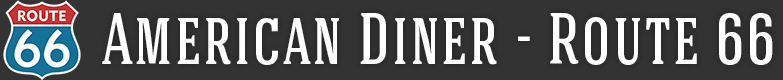
<style>
.page{position:relative;width:783px;height:80px;background:#333333}
.page>*{position:absolute;margin:0}
.t1{font:73.2px "HaginCapsMedium";letter-spacing:0.03em;color:#ffffff;scale:0.83 1}
</style>
<div class="page">
<p class="t1" style="left:102px;top:13px;width:671px;height:52px">American Diner - Route 66</p>
</div>
